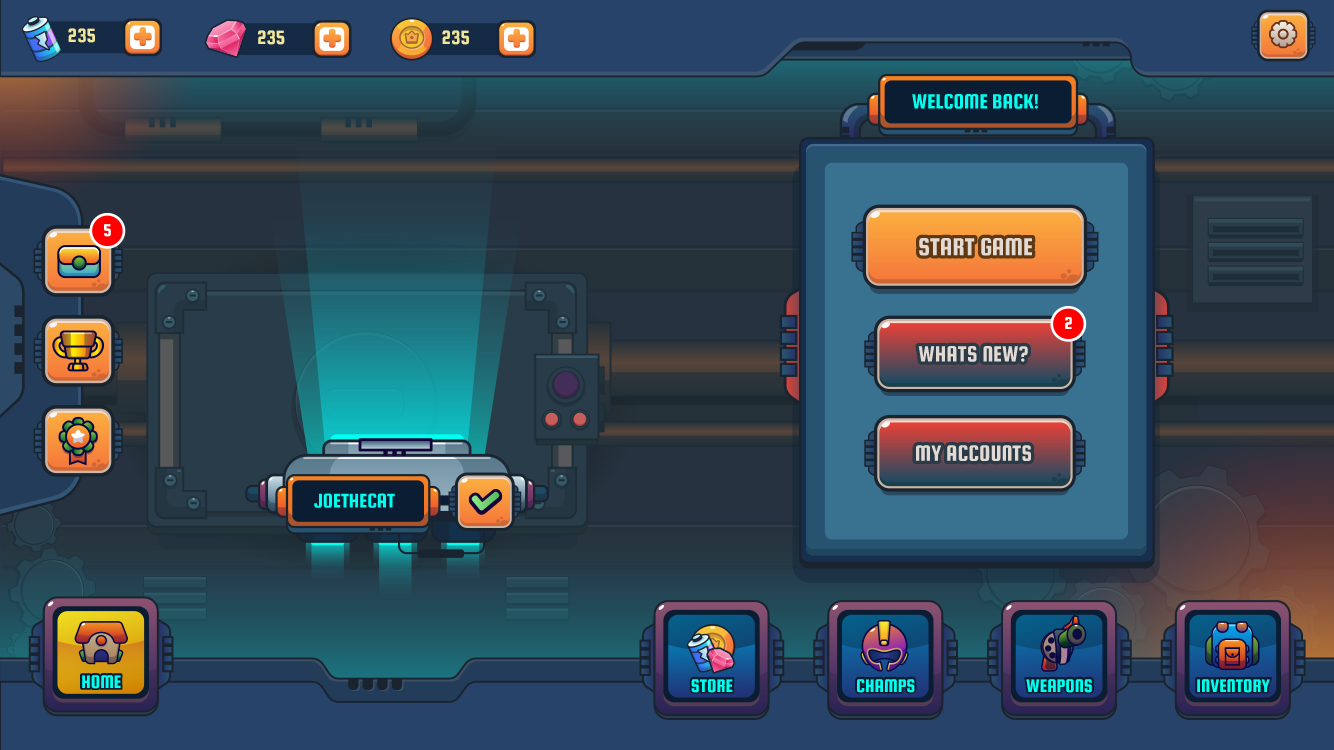
<style>
.page{position:relative;width:1334px;height:750px}
.page>*{position:absolute;margin:0}
.t1{font:20.5px "SquadaOne-Regular";color:#efe79c}
.t2{font:18.2px "SquadaOne-Regular";color:#ffffff;text-transform:uppercase}
.t3{font:18.1px "SquadaOne-Regular";color:#ffffff;text-transform:uppercase}
.t4{font:19.5px "SquadaOne-Regular";color:#00ffef;text-transform:uppercase}
</style>
<div class="page">
<p class="t1" style="left:68px;top:28px;width:27px;height:15px">235</p>
<p class="t1" style="left:258px;top:30px;width:27px;height:15px">235</p>
<p class="t1" style="left:442px;top:30px;width:27px;height:15px">235</p>
<p class="t2" style="left:104px;top:224px;width:7px;height:13px">5</p>
<p class="t3" style="left:1065px;top:317px;width:7px;height:12px">2</p>
<p class="t4" style="left:82px;top:675px;width:39px;height:14px">Home</p>
<p class="t4" style="left:82px;top:675px;width:39px;height:14px">Home</p>
<p class="t4" style="left:691px;top:679px;width:42px;height:14px">Store</p>
<p class="t4" style="left:691px;top:679px;width:42px;height:14px">Store</p>
<p class="t4" style="left:857px;top:679px;width:58px;height:14px">champs</p>
<p class="t4" style="left:857px;top:679px;width:58px;height:14px">champs</p>
<p class="t4" style="left:1026px;top:679px;width:66px;height:14px">Weapons</p>
<p class="t4" style="left:1026px;top:679px;width:66px;height:14px">Weapons</p>
<p class="t4" style="left:1197px;top:679px;width:73px;height:14px">Inventory</p>
<p class="t4" style="left:1197px;top:679px;width:73px;height:14px">Inventory</p>
</div>
